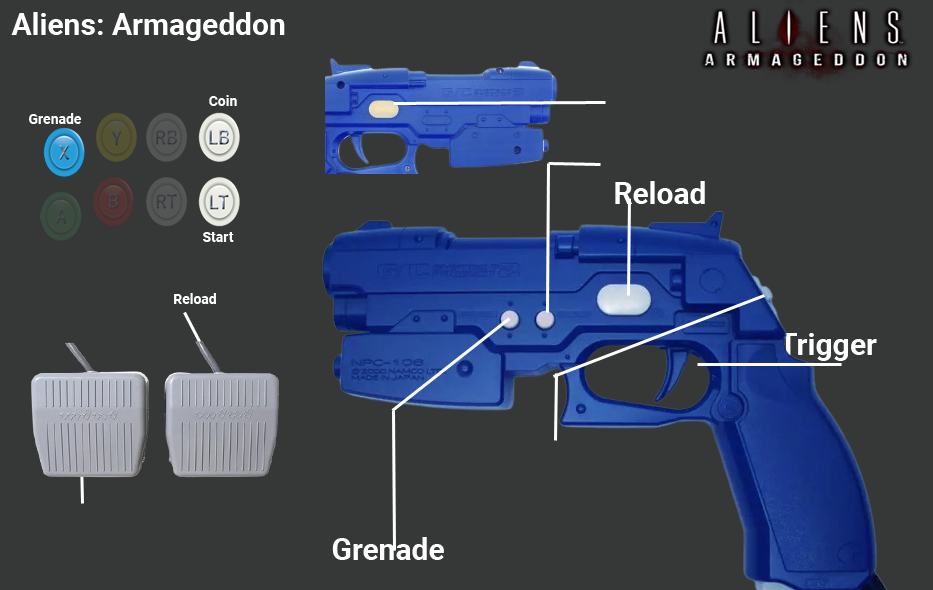
<style>
.page{position:relative;width:933px;height:590px;background:#363838}
.page>*{position:absolute;margin:0}
.t1{font:30px "Roboto-Bold";color:#ffffff}
.t2{font:14px "Roboto-Bold";color:#fefefe}
.t3{font:30px "Roboto-Bold";color:#fefefe}
</style>
<div class="page">
<p class="t1" style="left:11px;top:12px;width:274px;height:29px">Aliens: Armageddon</p>
<p class="t2" style="left:209px;top:95px;width:28px;height:11px">Coin</p>
<p class="t2" style="left:29px;top:113px;width:53px;height:11px">Grenade</p>
<p class="t3" style="left:615px;top:181px;width:90px;height:23px">Reload</p>
<p class="t2" style="left:203px;top:232px;width:31px;height:10px">Start</p>
<p class="t2" style="left:174px;top:293px;width:42px;height:11px">Reload</p>
<p class="t3" style="left:779px;top:333px;width:98px;height:28px">Trigger</p>
<p class="t3" style="left:332px;top:537px;width:112px;height:23px">Grenade</p>
</div>
